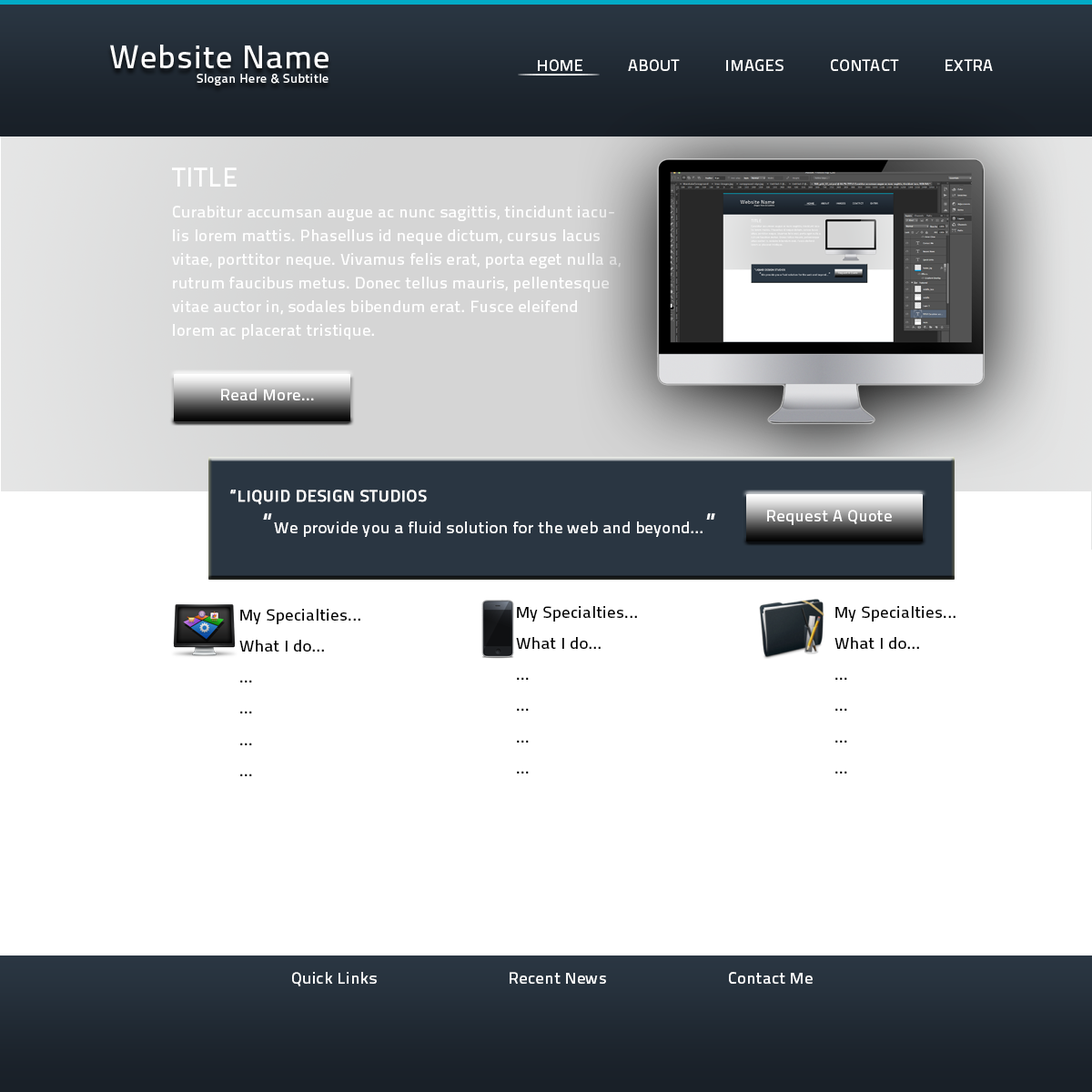
<style>
.page{position:relative;width:1092px;height:1092px;background:#ffffff}
.page>*{position:absolute;margin:0}
.t1{font:32.8px "TitilliumText25L-600wt";letter-spacing:0.03em;color:#ffffff}
.t2{font:16.4px "TitilliumText25L-600wt";letter-spacing:0.03em;color:#ffffff}
.t3{font:12.7px "TitilliumText25L-600wt";letter-spacing:0.03em;color:#ffffff}
.t4{font:16.4px/23.7px "TitilliumText25L-600wt";letter-spacing:0.03em;color:#ffffff}
.t5{font:27.3px/23.7px "TitilliumText25L-600wt";letter-spacing:0.03em;color:#ffffff}
.t6{font:16.4px/23.7px "TitilliumText25L-600wt";letter-spacing:0.03em;color:#ffffff;font-weight:bold}
.t7{font:16.4px/23.7px "TitilliumText25L-600wt";letter-spacing:0.03em;color:#000000}
</style>
<div class="page">
<p class="t1" style="left:110px;top:45px;width:219px;height:24px">Website Name</p>
<p class="t2" style="left:538px;top:59px;width:44px;height:12px">HOME</p>
<p class="t2" style="left:628px;top:59px;width:52px;height:12px">ABOUT</p>
<p class="t2" style="left:726px;top:59px;width:57px;height:12px">IMAGES</p>
<p class="t2" style="left:831px;top:59px;width:68px;height:12px">CONTACT</p>
<p class="t2" style="left:945px;top:59px;width:48px;height:12px">EXTRA</p>
<p class="t3" style="left:197px;top:74px;width:132px;height:12px">Slogan Here &amp; Subtitle</p>
<p class="t4" style="left:172px;top:167px;width:449px;height:172px"><span class="t5">TITLE</span><br>Curabitur accumsan augue ac nunc sagittis, tincidunt iaculis lorem mattis. Phasellus id neque dictum, cursus lacus vitae, porttitor neque. Vivamus felis erat, porta eget nulla a, rutrum faucibus metus. Donec tellus mauris, pellentesque vitae auctor in, sodales bibendum erat. Fusce eleifend lorem ac placerat tristique.</p>
<p class="t2" style="left:221px;top:389px;width:93px;height:11px">Read More...</p>
<p class="t4" style="left:230px;top:490px;width:485px;height:47px"><span class="t6">“LIQUID DESIGN STUDIOS<br> </span><span class="t5">“</span>We provide you a fluid solution for the web and beyond...<span class="t5">”</span></p>
<p class="t2" style="left:767px;top:510px;width:125px;height:15px">Request A Quote</p>
<p class="t7" style="left:239px;top:609px;width:121px;height:167px">My Specialties...<br>What I do...<br>...<br>...<br>...<br>...</p>
<p class="t7" style="left:516px;top:606px;width:121px;height:167px">My Specialties...<br>What I do...<br>...<br>...<br>...<br>...</p>
<p class="t7" style="left:834px;top:606px;width:121px;height:167px">My Specialties...<br>What I do...<br>...<br>...<br>...<br>...</p>
<p class="t2" style="left:292px;top:972px;width:85px;height:14px">Quick Links</p>
<p class="t2" style="left:510px;top:972px;width:96px;height:12px">Recent News</p>
<p class="t2" style="left:729px;top:972px;width:84px;height:12px">Contact Me</p>
</div>
